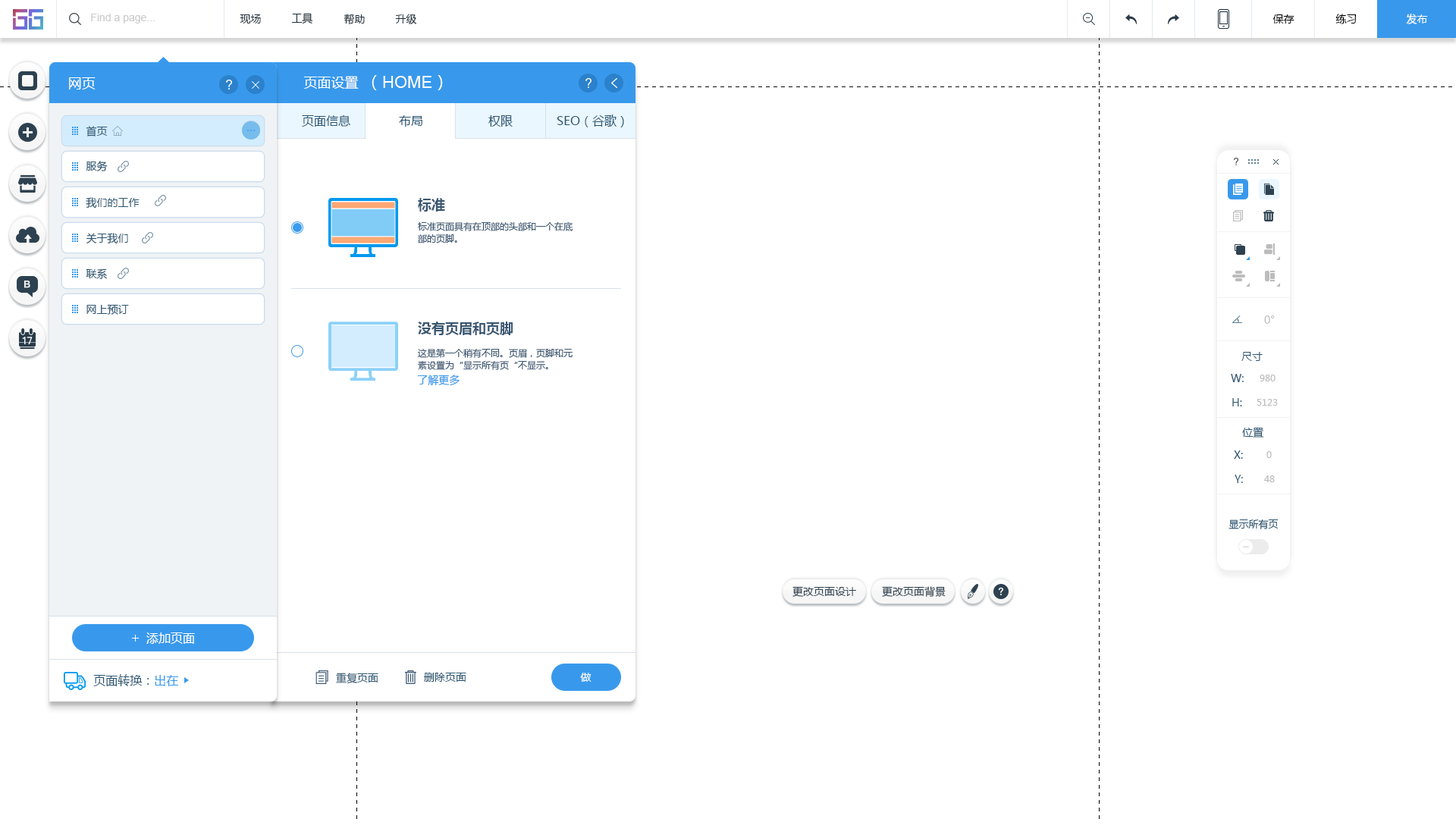
<style>
.page{position:relative;width:1456px;height:819px;background:#ffffff}
.page>*{position:absolute;margin:0}
.t1{font:10.6px "ArialMT";color:#cccccc}
.t2{font:10.6px "MicrosoftYaHei";color:#20303c}
.t3{font:10.6px "MicrosoftYaHei";color:#000000}
.t4{font:10.6px "MicrosoftYaHei";color:#ffffff}
.t5{font:13.6px "MicrosoftYaHei";color:#ffffff}
.t6{font:16.7px "ArialMT";color:#ffffff}
.t7{font:16.7px "MicrosoftYaHei";color:#ffffff}
.t8{font:10.6px "MicrosoftYaHei";color:#2b5672}
.t9{font:12.1px "MicrosoftYaHei";color:#2b5672}
.t10{font:13.6px "MicrosoftYaHei-Bold";color:#395671}
.t11{font:9.1px/12.1px "MicrosoftYaHei";color:#395671}
.t12{font:10.6px "MicrosoftYaHei";color:#bcbcbc}
.t13{font:10.6px "MicrosoftYaHei";color:#3899ec}
.t14{font:9.1px "MicrosoftYaHei";color:#bcbcbc}
.t15{font:9.9px "MicrosoftYaHei";color:#2b5672}
.t16{font:10.6px "MicrosoftYaHei";color:#2d4150}
.t17{font:12.1px "MicrosoftYaHei";color:#ffffff}
.t18{font:9.1px "MicrosoftYaHei";color:#2b5672}
.t19{font:9.1px "MicrosoftYaHei";color:#3899ec}
</style>
<div class="page">
<p class="t1" style="left:91px;top:14px;width:64px;height:10px">Find a page...</p>
<p class="t2" style="left:240px;top:14px;width:21px;height:10px">现场</p>
<p class="t2" style="left:291px;top:13px;width:22px;height:11px">工具</p>
<p class="t2" style="left:344px;top:14px;width:21px;height:11px">帮助</p>
<p class="t2" style="left:395px;top:14px;width:22px;height:10px">升级</p>
<p class="t3" style="left:1272px;top:14px;width:22px;height:10px">保存</p>
<p class="t3" style="left:1335px;top:14px;width:22px;height:10px">练习</p>
<p class="t4" style="left:1406px;top:14px;width:22px;height:10px">发布</p>
<p class="t5" style="left:69px;top:77px;width:27px;height:12px">网页</p>
<p class="t5" style="left:303px;top:76px;width:56px;height:13px">页面设置</p>
<p class="t6" style="left:372px;top:75px;width:71px;height:15px"><span class="t7">（</span>HOME<span class="t7">）</span></p>
<p class="t8" style="left:86px;top:126px;width:22px;height:10px">首页</p>
<p class="t9" style="left:302px;top:115px;width:48px;height:12px">页面信息</p>
<p class="t9" style="left:399px;top:115px;width:23px;height:12px">布局</p>
<p class="t9" style="left:488px;top:115px;width:25px;height:12px">权限</p>
<p class="t9" style="left:557px;top:115px;width:67px;height:12px">SEO（谷歌）</p>
<p class="t8" style="left:86px;top:161px;width:22px;height:10px">服务</p>
<p class="t8" style="left:86px;top:197px;width:54px;height:12px">我们的工作</p>
<p class="t10" style="left:418px;top:198px;width:27px;height:14px">标准</p>
<p class="t11" style="left:418px;top:221px;width:155px;height:22px">标准页面具有在顶部的头部和一个在底<br>部的页脚。</p>
<p class="t8" style="left:86px;top:233px;width:42px;height:11px">关于我们</p>
<p class="t8" style="left:86px;top:268px;width:21px;height:11px">联系</p>
<p class="t8" style="left:86px;top:304px;width:43px;height:11px">网上预订</p>
<p class="t12" style="left:1264px;top:315px;width:11px;height:9px">0°</p>
<p class="t10" style="left:418px;top:322px;width:95px;height:13px">没有页眉和页脚</p>
<p class="t11" style="left:418px;top:348px;width:155px;height:22px">这是第一个稍有不同。页眉，页脚和元<br>素设置为“显示所有页“不显示。</p>
<p class="t8" style="left:1241px;top:352px;width:22px;height:9px">尺寸</p>
<p class="t13" style="left:417px;top:375px;width:43px;height:11px">了解更多</p>
<p class="t8" style="left:1231px;top:374px;width:13px;height:8px">W:</p>
<p class="t14" style="left:1260px;top:375px;width:15px;height:6px">980</p>
<p class="t8" style="left:1232px;top:398px;width:10px;height:8px">H:</p>
<p class="t14" style="left:1257px;top:399px;width:21px;height:7px">5123</p>
<p class="t8" style="left:1242px;top:427px;width:22px;height:11px">位置</p>
<p class="t8" style="left:1234px;top:450px;width:9px;height:9px">X:</p>
<p class="t14" style="left:1266px;top:451px;width:6px;height:7px">0</p>
<p class="t8" style="left:1235px;top:475px;width:8px;height:8px">Y:</p>
<p class="t14" style="left:1264px;top:475px;width:11px;height:7px">48</p>
<p class="t15" style="left:1228px;top:519px;width:51px;height:10px">显示所有页</p>
<p class="t16" style="left:792px;top:586px;width:64px;height:11px">更改页面设计</p>
<p class="t16" style="left:882px;top:586px;width:64px;height:11px">更改页面背景</p>
<p class="t17" style="left:146px;top:632px;width:49px;height:12px">添加页面</p>
<p class="t18" style="left:93px;top:674px;width:86px;height:12px">页面转换：<span class="t19">出在</span></p>
<p class="t8" style="left:336px;top:673px;width:42px;height:11px">重复页面</p>
<p class="t8" style="left:424px;top:673px;width:42px;height:9px">删除页面</p>
<p class="t4" style="left:580px;top:673px;width:11px;height:9px">做</p>
</div>
